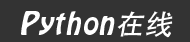
<style>
.page{position:relative;width:190px;height:42px;background:#333333}
.page>*{position:absolute;margin:0}
.t1{font:28px "HoboStd";letter-spacing:0.05em;color:#ffffff;font-style:italic}
.t2{font:28px "AdobeHeitiStd-Regular";letter-spacing:0.05em;color:#ffffff;font-style:italic}
</style>
<div class="page">
<p class="t1" style="left:21px;top:11px;width:152px;height:27px">Python<span class="t2">在线</span></p>
</div>
